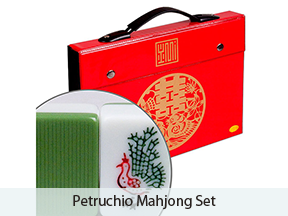
<style>
.page{position:relative;width:288px;height:216px;background:#ffffff}
.page>*{position:absolute;margin:0}
.t1{font:15px "MyriadPro-Regular";color:#28211e}
</style>
<div class="page">
<p class="t1" style="left:73px;top:195px;width:143px;height:15px">Petruchio Mahjong Set</p>
</div>
